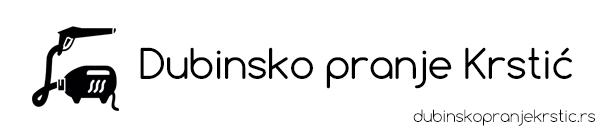
<style>
.page{position:relative;width:600px;height:128px;background:#ffffff}
.page>*{position:absolute;margin:0}
.t1{font:40px "Comfortaa-Regular";color:#000000}
.t2{font:16px "Comfortaa-Light";color:#000000}
</style>
<div class="page">
<p class="t1" style="left:140px;top:47px;width:432px;height:42px">Dubinsko pranje Krstić</p>
<p class="t2" style="left:413px;top:109px;width:182px;height:17px">dubinskopranjekrstic.rs</p>
</div>
